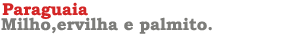
<style>
.page{position:relative;width:300px;height:50px;background:#ffffff}
.page>*{position:absolute;margin:0}
.t1{font:17px "BookmanOldStyle-Bold";color:#d42525}
.t2{font:17px "BookmanOldStyle-Bold";color:#7c7c79}
</style>
<div class="page">
<p class="t1" style="left:2px;top:2px;width:86px;height:17px">Paraguaia</p>
<p class="t2" style="left:1px;top:17px;width:211px;height:17px">Milho,ervilha e palmito.</p>
</div>
